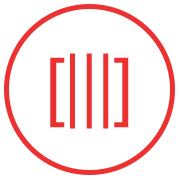
<style>
.page{position:relative;width:180px;height:180px;background:#ffffff}
.page>*{position:absolute;margin:0}
.t1{font:75px "HelveticaNeue";color:#eb3231}
</style>
<div class="page">
<p class="t1" style="left:50px;top:53px;width:79px;height:76px">[|||]</p>
</div>
